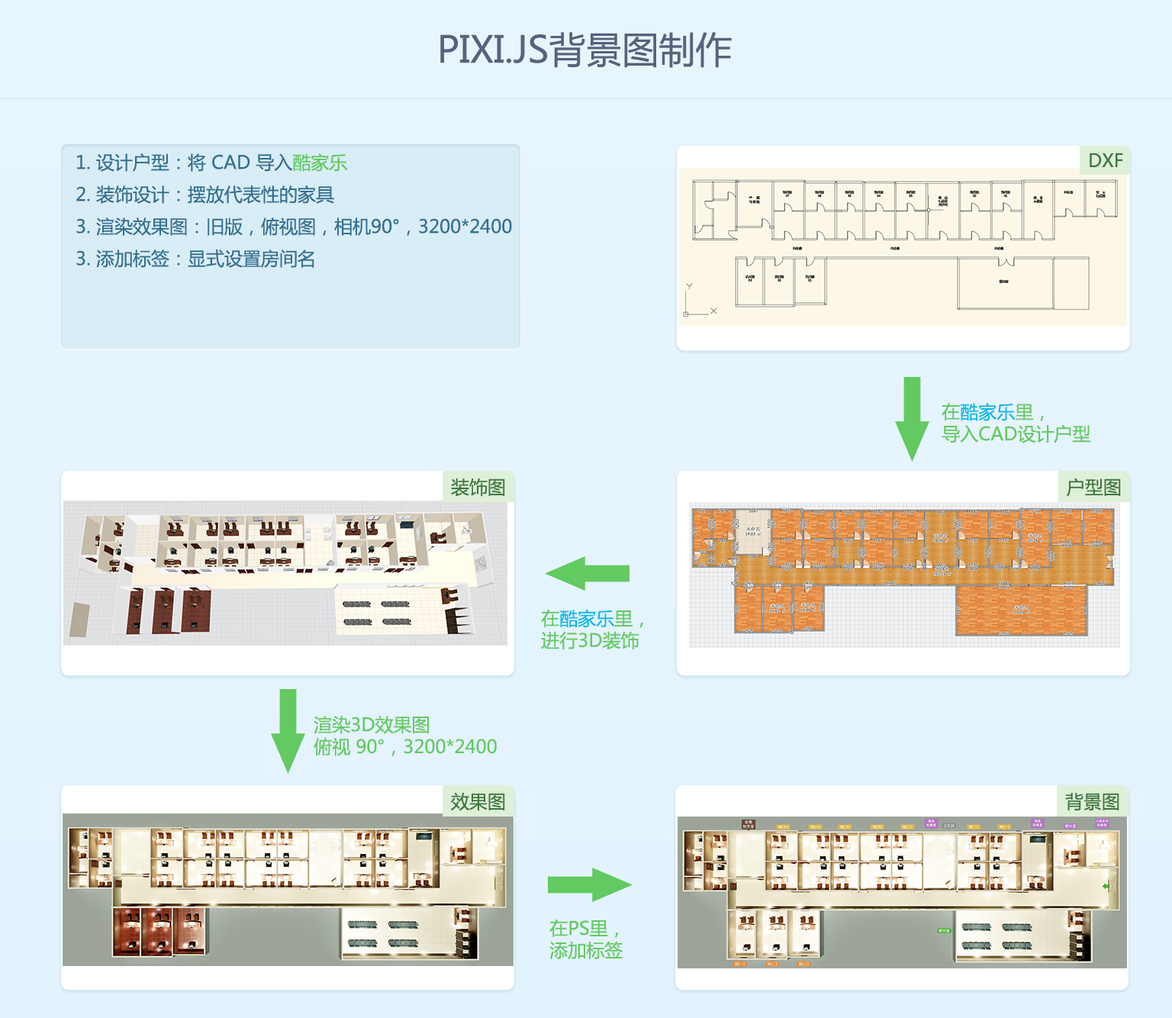
<style>
.page{position:relative;width:1172px;height:1018px}
.page>*{position:absolute;margin:0}
.t1{font:36.6px "MicrosoftYaHei";color:#5a607d}
.t2{font:18.3px/32px "MicrosoftYaHei";color:#31708f}
.t3{font:18.3px/32px "MicrosoftYaHei";color:#63c961}
.t4{font:18.3px "MicrosoftYaHei";color:#3c763d}
.t5{font:18.3px "MicrosoftYaHei";color:#63c961}
.t6{font:18.3px "MicrosoftYaHei";color:#00b8ec}
</style>
<div class="page">
<p class="t1" style="left:440px;top:32px;width:292px;height:36px">PIXI.JS背景图制作</p>
<p class="t2" style="left:76px;top:153px;width:436px;height:115px">1. 设计户型：将 CAD 导入<span class="t3">酷家乐<br></span>2. 装饰设计：摆放代表性的家具<br>3. 渲染效果图：旧版，俯视图，相机90°，3200*2400<br>3. 添加标签：显式设置房间名</p>
<p class="t4" style="left:1089px;top:153px;width:34px;height:14px">DXF</p>
<p class="t5" style="left:941px;top:402px;width:149px;height:41px">在<span class="t6">酷家乐</span>里，<br>导入CAD设计户型</p>
<p class="t4" style="left:451px;top:478px;width:54px;height:19px">装饰图</p>
<p class="t4" style="left:1066px;top:478px;width:55px;height:19px">户型图</p>
<p class="t5" style="left:541px;top:609px;width:102px;height:41px">在<span class="t6">酷家乐</span>里，<br>进行3D装饰</p>
<p class="t5" style="left:314px;top:716px;width:183px;height:40px">渲染3D效果图<br>俯视 90°，3200*2400</p>
<p class="t4" style="left:451px;top:792px;width:54px;height:19px">效果图</p>
<p class="t4" style="left:1065px;top:793px;width:54px;height:17px">背景图</p>
<p class="t5" style="left:549px;top:918px;width:73px;height:42px">在PS里，<br>添加标签</p>
</div>
